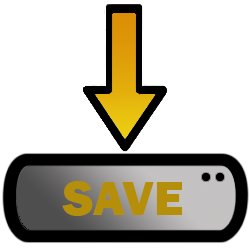
<style>
.page{position:relative;width:250px;height:250px;background:#ffffff}
.page>*{position:absolute;margin:0}
.t1{font:50px "FranklinGothic-Heavy";color:#b58f09}
</style>
<div class="page">
<p class="t1" style="left:62px;top:181px;width:120px;height:35px">SAVE</p>
</div>
